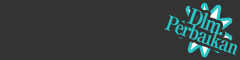
<style>
.page{position:relative;width:240px;height:60px;background:#333333}
.page>*{position:absolute;margin:0}
.t1{font:20px/20px "RyuminPro-ExBold";letter-spacing:-0.08em;color:#2bc5c8;scale:0.9 1}
.t2{font:21.6px/20px "RyuminPro-ExBold";letter-spacing:-0.08em;color:#2bc5c8;scale:0.9 1}
</style>
<div class="page">
<p class="t1" style="left:164px;top:8px;width:73px;height:47px;text-align:center;rotate:20deg"><span class="t2">Dlm.<br></span>Perbaikan</p>
</div>
